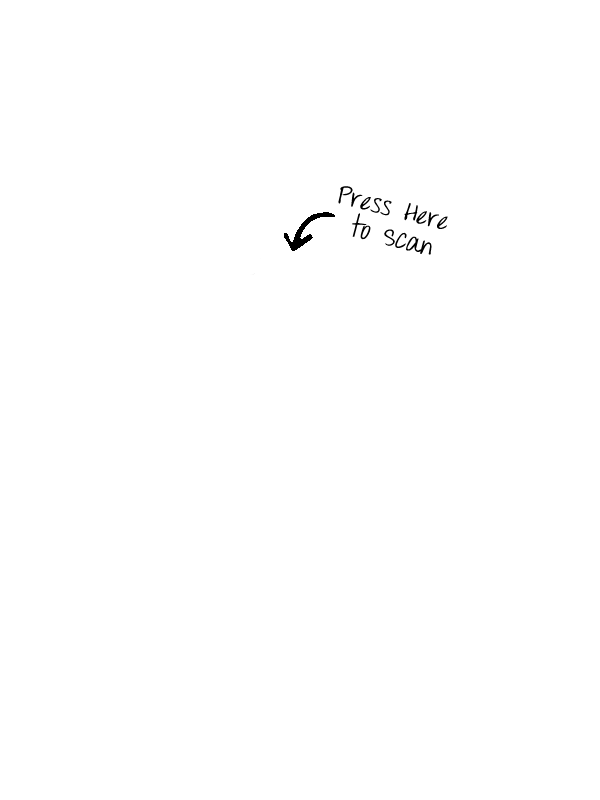
<style>
.page{position:relative;width:600px;height:800px;background:#ffffff}
.page>*{position:absolute;margin:0}
.t1{font:24px "ThrowMyHandsUpintheAir";color:#000000;scale:1.13 1}
</style>
<div class="page">
<p class="t1" style="left:338px;top:186px;width:110px;height:69px;text-align:center;rotate:14deg">Press Here<br> to Scan</p>
</div>
